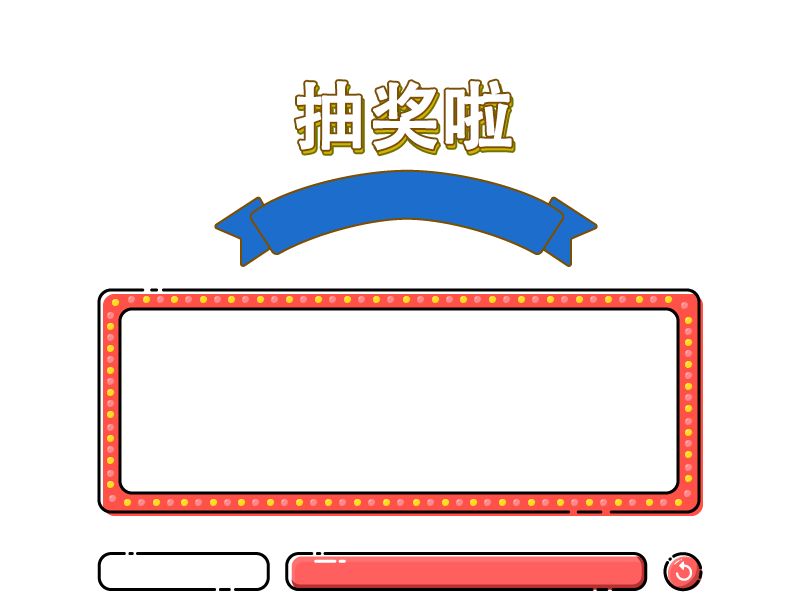
<style>
.page{position:relative;width:800px;height:600px;background:#ffffff}
.page>*{position:absolute;margin:0}
.t1{font:73px "AdobeHeitiStd-Regular";letter-spacing:-0.02em;color:#ffffff;font-weight:bold}
</style>
<div class="page">
<p class="t1" style="left:295px;top:80px;width:217px;height:71px">抽奖啦</p>
</div>
